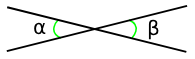
<style>
.page{position:relative;width:195px;height:59px;background:#ffffff}
.page>*{position:absolute;margin:0}
.t1{font:20px "DejaVuSans";color:#000000}
</style>
<div class="page">
<p class="t1" style="left:34px;top:22px;width:12px;height:13px">α</p>
<p class="t1" style="left:148px;top:19px;width:11px;height:21px">β</p>
</div>
